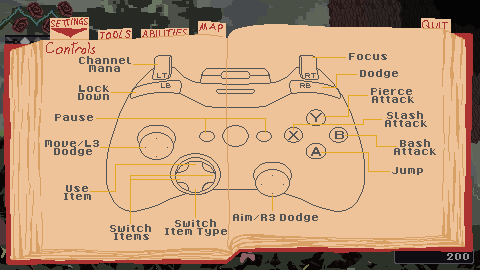
<style>
.page{position:relative;width:480px;height:270px;background:#eec39a}
.page>*{position:absolute;margin:0}
.t1{font:16px "8-Bit-Madness";color:#545454}
.t2{font:16px/8px "8-Bit-Madness";color:#545454}
</style>
<div class="page">
<p class="t1" style="left:349px;top:53px;width:38px;height:7px">Focus</p>
<p class="t2" style="left:79px;top:56px;width:52px;height:16px;text-align:center">Channel<br>Mana</p>
<p class="t1" style="left:360px;top:69px;width:38px;height:9px">Dodge</p>
<p class="t2" style="left:78px;top:85px;width:31px;height:15px;text-align:center">Lock<br>Down</p>
<p class="t2" style="left:371px;top:88px;width:43px;height:15px;text-align:center">Pierce <br>Attack</p>
<p class="t2" style="left:385px;top:111px;width:42px;height:16px;text-align:center">Slash <br>Attack</p>
<p class="t1" style="left:55px;top:114px;width:38px;height:7px">Pause</p>
<p class="t2" style="left:45px;top:140px;width:54px;height:16px;text-align:center">Move/L3 <br>Dodge</p>
<p class="t2" style="left:394px;top:139px;width:42px;height:16px;text-align:center">Bash<br>Attack</p>
<p class="t1" style="left:392px;top:167px;width:31px;height:8px">Jump</p>
<p class="t2" style="left:64px;top:185px;width:27px;height:15px;text-align:center">Use<br> Item</p>
<p class="t2" style="left:165px;top:219px;width:62px;height:17px;text-align:center">Switch <br>Item Type</p>
<p class="t1" style="left:233px;top:213px;width:85px;height:9px">Aim/R3 Dodge</p>
<p class="t2" style="left:110px;top:224px;width:41px;height:16px;text-align:center">Switch <br>Items</p>
</div>
